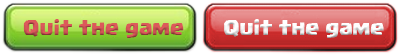
<style>
.page{position:relative;width:400px;height:56px}
.page>*{position:absolute;margin:0}
.t1{font:16px "Supercell-Magic";color:#dc5a5a}
.t2{font:16.1px "Supercell-Magic";color:#ffffff}
</style>
<div class="page">
<p class="t1" style="left:23px;top:19px;width:161px;height:19px">Quit the game</p>
<p class="t2" style="left:224px;top:19px;width:160px;height:19px">Quit the game</p>
</div>
